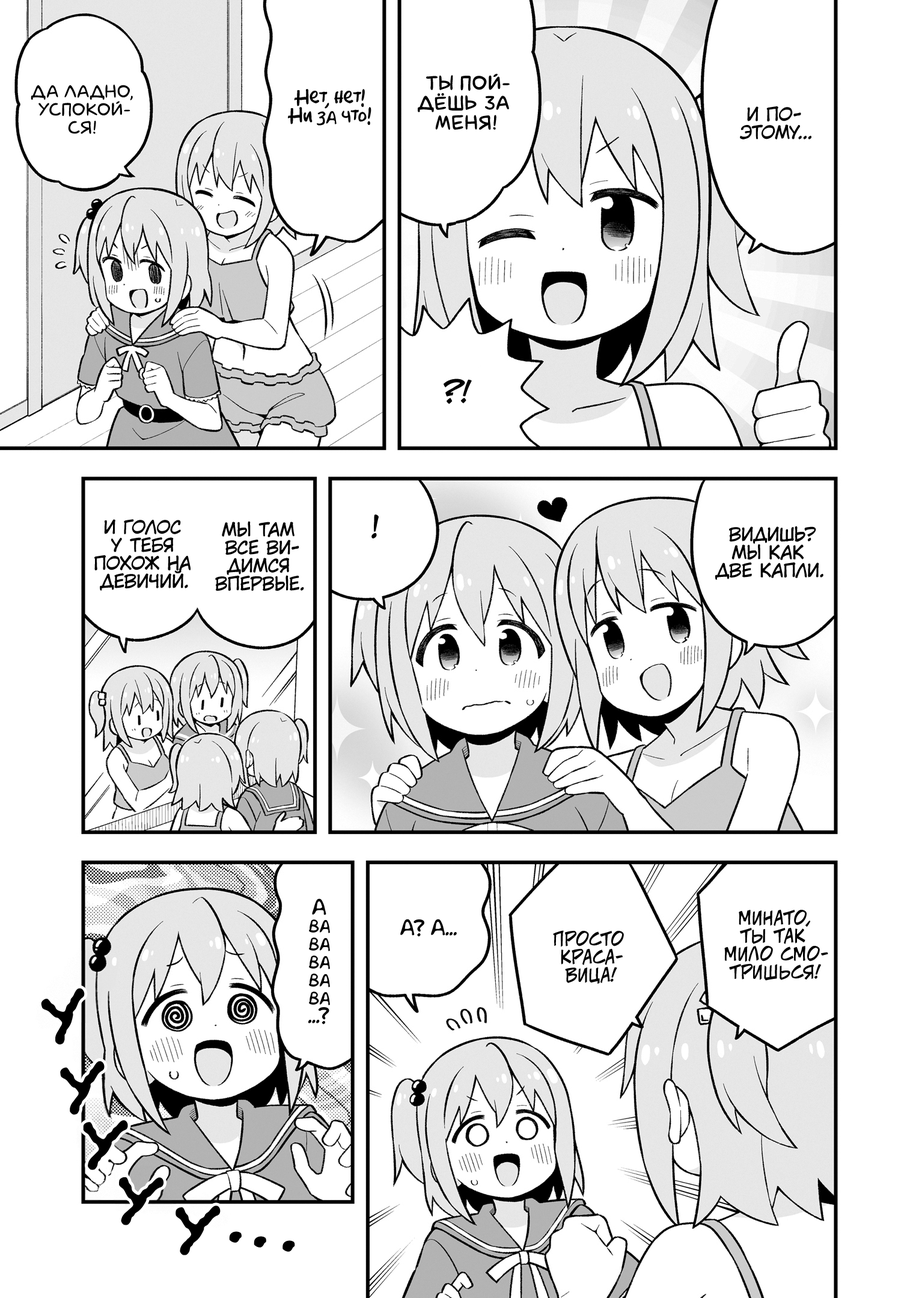
<style>
.page{position:relative;width:919px;height:1298px;background:#ffffff}
.page>*{position:absolute;margin:0}
.t1{font:19.8px "laCartoonerie";color:#000000;text-transform:uppercase;font-weight:bold}
.t2{font:18px "laCartoonerie";color:#000000;text-transform:uppercase}
.t3{font:18px "AkbarPlain";color:#000000}
.t4{font:18px "KuraiVoice2";color:#000000;text-transform:uppercase}
.t5{font:28.8px "v_CCJeffCampbell";color:#000000;text-transform:uppercase}
.t6{font:28.8px "KuraiVoice2";color:#000000;text-transform:uppercase}
.t7{font:18px "v_CCJeffCampbell";color:#000000;text-transform:uppercase}
.t8{font:72.1px "el_CCEvilSchemes";color:#000000}
</style>
<div class="page">
<p class="t1" style="left:418px;top:73px;width:92px;height:57px;text-align:center">Ты пой-<br>дёшь за<br>меня!</p>
<p class="t2" style="left:31px;top:84px;width:102px;height:50px;text-align:center">Да ладно,<br>успокой-<br>ся!</p>
<p class="t3" style="left:288px;top:89px;width:83px;height:37px;text-align:center">Нет, нет!<br>Ни за что!</p>
<p class="t4" style="left:740px;top:106px;width:71px;height:33px;text-align:center">И по-<br>этому...</p>
<p class="t5" style="left:443px;top:379px;width:29px;height:25px">?!</p>
<p class="t4" style="left:94px;top:519px;width:96px;height:72px;text-align:center">И голос<br>у тебя<br>похож на<br>девичий.</p>
<p class="t4" style="left:215px;top:521px;width:89px;height:70px;text-align:center">Мы там<br>все ви-<br>димся<br>впервые.</p>
<p class="t6" style="left:371px;top:514px;width:8px;height:24px">!</p>
<p class="t4" style="left:714px;top:526px;width:109px;height:54px;text-align:center">Видишь?<br>Мы как<br>две капли.</p>
<p class="t3" style="left:308px;top:898px;width:22px;height:126px;text-align:center">А<br>ва<br>ва<br>ва<br>ва<br>ва<br>...?</p>
<p class="t7" style="left:724px;top:910px;width:104px;height:71px;text-align:center">Минато,<br>ты так<br>мило смо-<br>тришься!</p>
<p class="t3" style="left:400px;top:919px;width:57px;height:18px">А? А...</p>
<p class="t7" style="left:553px;top:930px;width:71px;height:54px;text-align:center">Просто<br>краса-<br>вица!</p>
<p class="t8" style="left:41px;top:988px;width:44px;height:56px;rotate:-8deg">у</p>
<p class="t8" style="left:60px;top:1061px;width:45px;height:54px;rotate:-1deg">у</p>
<p class="t8" style="left:83px;top:1120px;width:45px;height:50px;rotate:6deg">у</p>
<p class="t8" style="left:119px;top:1177px;width:45px;height:48px;rotate:10deg">у</p>
<p class="t8" style="left:175px;top:1205px;width:46px;height:50px;rotate:7deg">у</p>
<p class="t8" style="left:229px;top:1231px;width:13px;height:12px">.</p>
<p class="t8" style="left:254px;top:1236px;width:12px;height:11px">.</p>
<p class="t8" style="left:282px;top:1240px;width:13px;height:12px">.</p>
</div>
